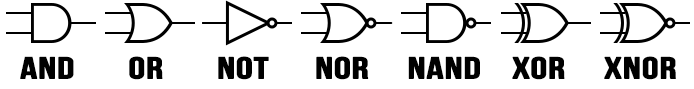
<style>
.page{position:relative;width:694px;height:89px;background:#ffffff}
.page>*{position:absolute;margin:0}
.t1{font:30px "BebasNeue";color:#000000;font-weight:bold;scale:1.39 1}
</style>
<div class="page">
<p class="t1" style="left:20px;top:56px;width:656px;height:24px">AND       or       nOT      NOR     NAND    XOR     XNOR</p>
</div>
